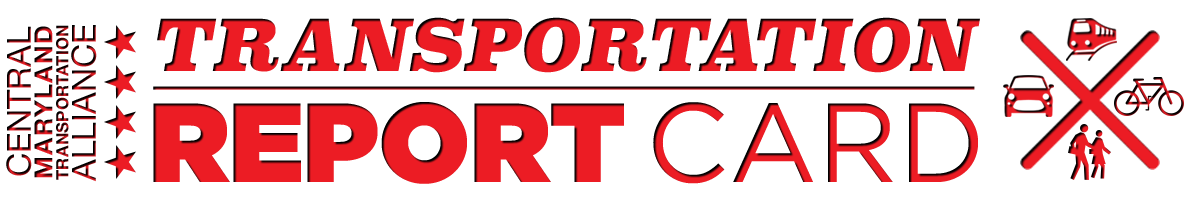
<style>
.page{position:relative;width:1198px;height:200px;background:#ffffff}
.page>*{position:absolute;margin:0}
.t1{font:70.2px "Superclarendon-BlackItalic";color:#ec1c24;text-transform:uppercase}
.t2{font:16.7px "HelveticaNeue-Bold";letter-spacing:0.02em;text-transform:uppercase}
.t3{font:33.3px "HelveticaNeue";text-transform:uppercase}
.t4{font:25px "HelveticaNeue-Bold";letter-spacing:0.06em;text-transform:uppercase}
.t5{font:111.9px "Gotham-Ultra";color:#ec1c24;text-transform:uppercase}
.t6{font:111.9px "Gotham-Book";text-transform:uppercase}
</style>
<div class="page">
<p class="t1" style="left:157px;top:17px;width:823px;height:56px">Transportation</p>
<p class="t2" style="left:6px;top:25px;width:91px;height:157px;text-align:center;rotate:-90deg"><span class="t3">central<br></span><span class="t4">maryland<br></span>transportation<br><span class="t3">alliance</span></p>
<p class="t5" style="left:153px;top:102px;width:471px;height:82px">Report</p>
<p class="t6" style="left:653px;top:102px;width:325px;height:82px">CARD</p>
</div>
